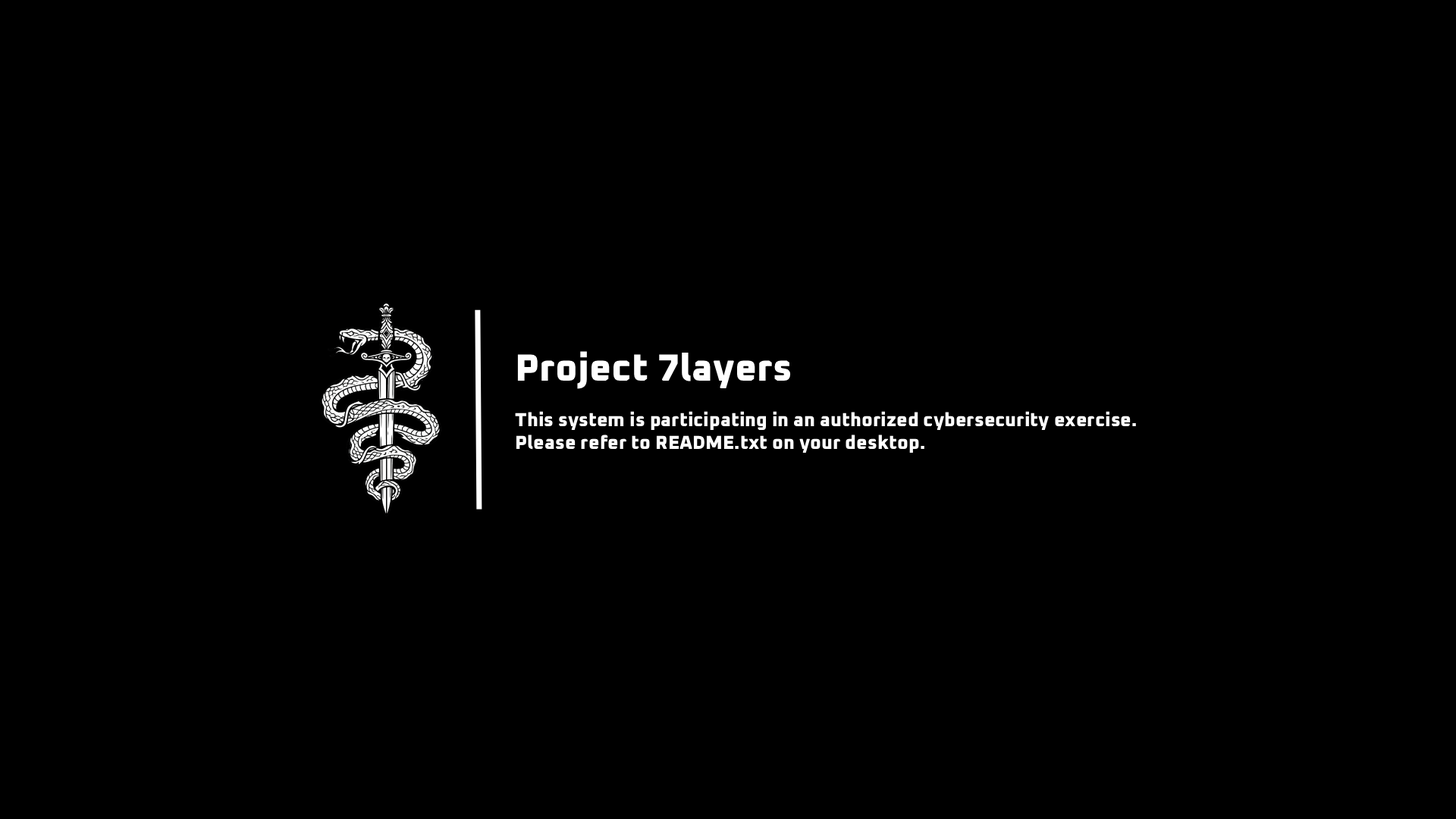
<style>
.page{position:relative;width:1456px;height:819px;background:#000000}
.page>*{position:absolute;margin:0}
.t1{font:19px "OxaniumRoman-ExtraBold";color:#ffffff}
.t2{font:37.9px "OxaniumRoman-ExtraBold";color:#ffffff}
</style>
<div class="page">
<p class="t1" style="left:515px;top:351px;width:621px;height:102px"><span class="t2">Project 7layers<br><br></span>This system is participating in an authorized cybersecurity exercise.<br>Please refer to README.txt on your desktop.</p>
</div>
